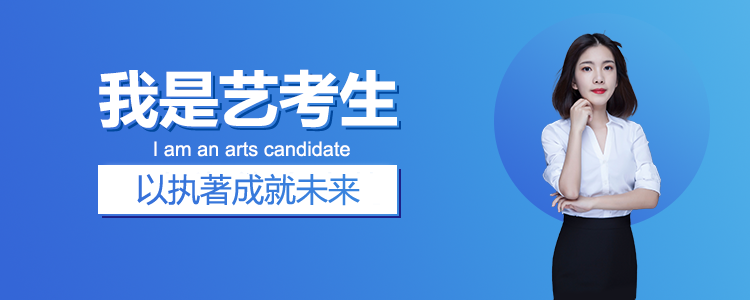
<style>
.page{position:relative;width:750px;height:300px}
.page>*{position:absolute;margin:0}
.t1{font:60px "MicrosoftYaHei-Bold";color:#ffffff}
.t2{font:20px "ArialMT";color:#ffffff}
</style>
<div class="page">
<p class="t1" style="left:99px;top:69px;width:298px;height:60px">我是艺考生</p>
<p class="t2" style="left:154px;top:141px;width:196px;height:16px">I am an arts candidate</p>
</div>
